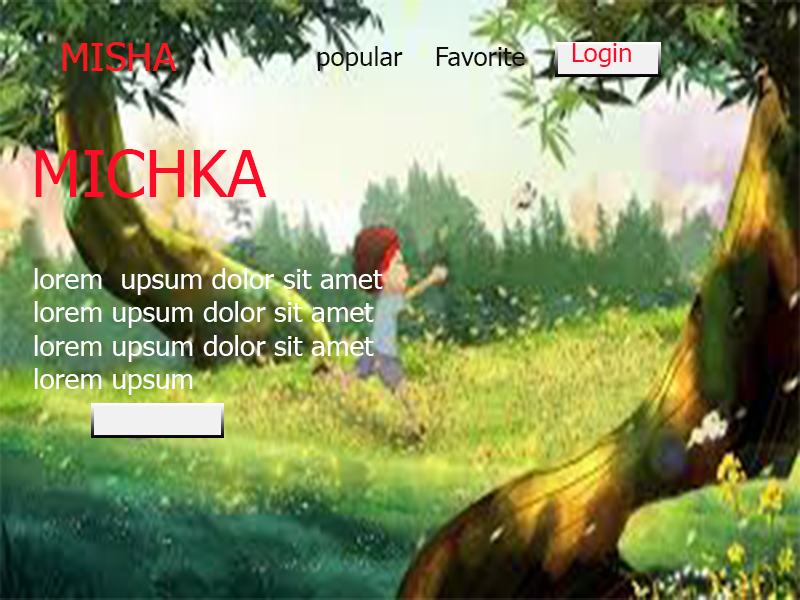
<style>
.page{position:relative;width:800px;height:600px}
.page>*{position:absolute;margin:0}
.t1{font:39px "Tahoma";color:#ff1520}
.t2{font:22px "Tahoma";color:#08040a}
.t3{font:26px "Tahoma";color:#101010}
.t4{font:26px "Tahoma";color:#ff0a27}
.t5{font:65px "Tahoma";color:#ff0a27}
.t6{font:28px "Tahoma";color:#ffffff}
.t7{font:65px "Tahoma";color:#ffffff}
</style>
<div class="page">
<p class="t1" style="left:62px;top:42px;width:115px;height:29px"><span class="t2"><br></span>MISHA</p>
<p class="t3" style="left:317px;top:46px;width:208px;height:25px">popular    Favorite</p>
<p class="t4" style="left:572px;top:43px;width:59px;height:24px">Login</p>
<p class="t5" style="left:35px;top:149px;width:232px;height:49px">MICHKA</p>
<p class="t6" style="left:34px;top:268px;width:349px;height:127px"><span class="t7"><br></span>lorem  upsum dolor sit amet <br>lorem upsum dolor sit amet<br>lorem upsum dolor sit amet<br>lorem upsum</p>
</div>
